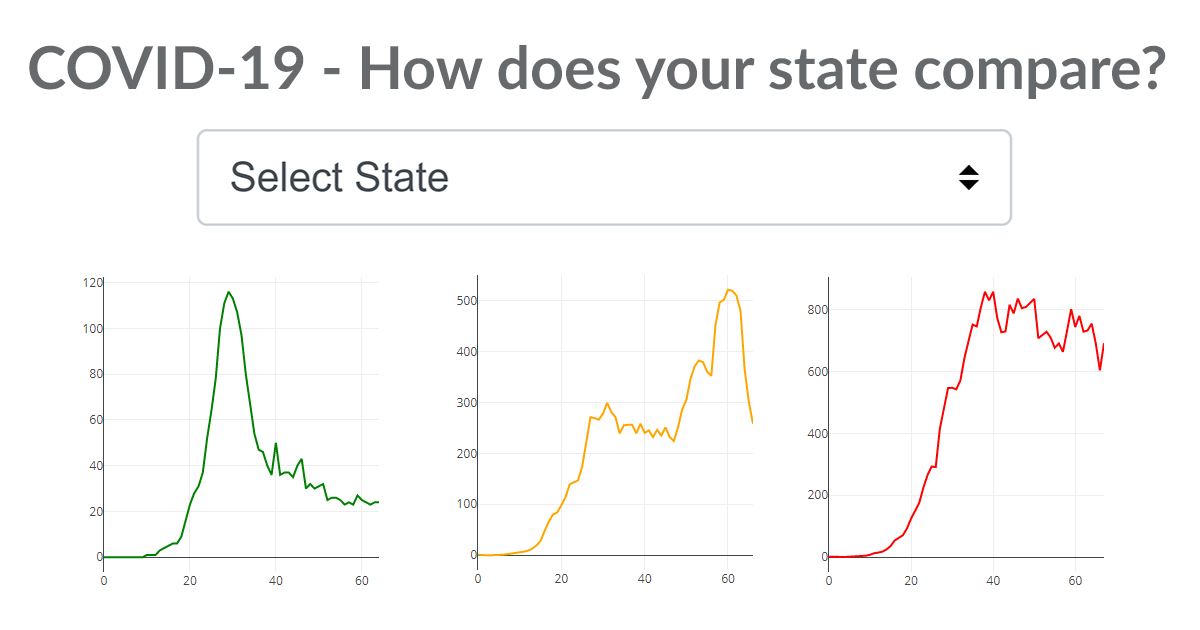
<style>
.page{position:relative;width:1200px;height:630px;background:#ffffff}
.page>*{position:absolute;margin:0}
.t1{font:59.2px "Lato-Bold";color:#676a6c}
</style>
<div class="page">
<p class="t1" style="left:29px;top:45px;width:1137px;height:54px">COVID-19 - How does your state compare?</p>
</div>
